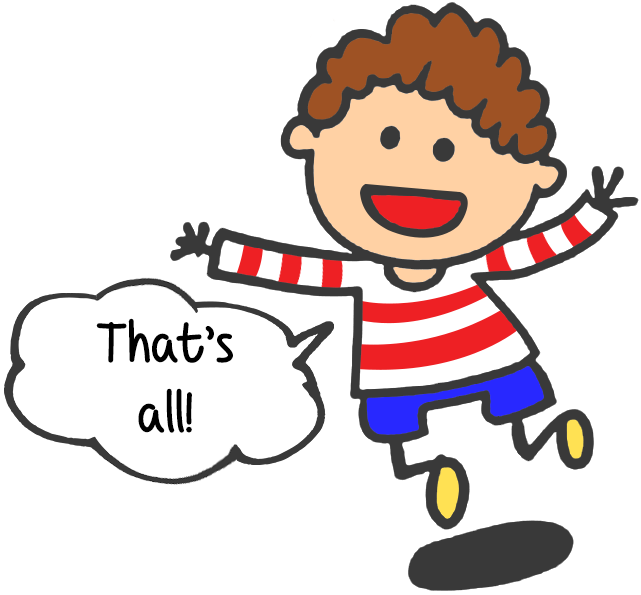
<style>
.page{position:relative;width:641px;height:595px;background:#ffffff}
.page>*{position:absolute;margin:0}
.t1{font:58.3px "BordersDivide,ButHeartsShallConquer";color:#000000}
</style>
<div class="page">
<p class="t1" style="left:96px;top:318px;width:137px;height:115px;text-align:center">That’s<br>all!</p>
</div>
